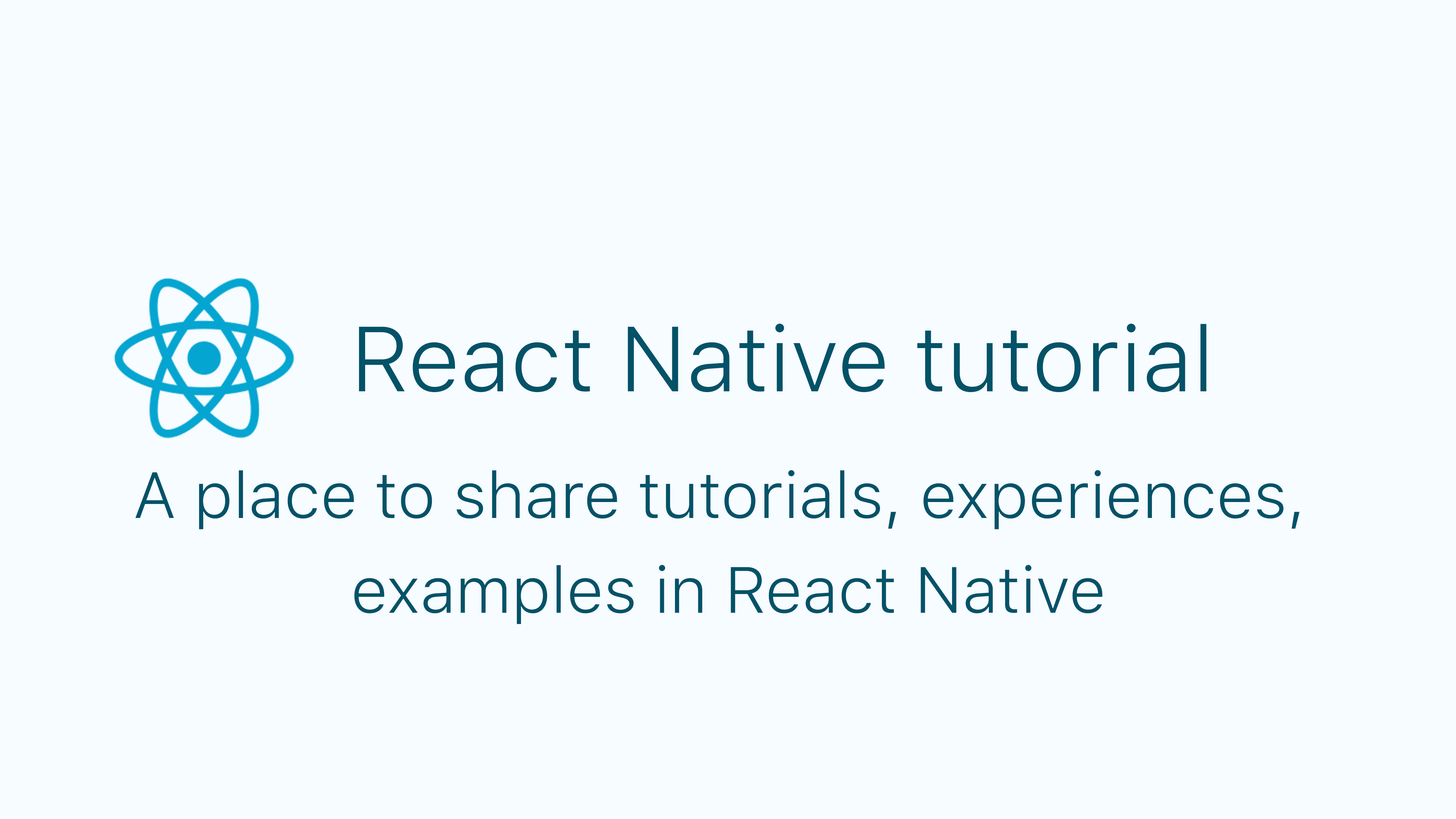
<style>
.page{position:relative;width:1456px;height:819px;background:#f6fcff}
.page>*{position:absolute;margin:0}
.t1{font:91.6px "SFUIText-Light";color:#025268}
.t2{font:64.8px/47.4px "SFUIText-Light";color:#025268}
</style>
<div class="page">
<p class="t1" style="left:359px;top:323px;width:847px;height:69px">React Native tutorial</p>
<p class="t2" style="left:135px;top:470px;width:1165px;height:154px;text-align:center">A place to share tutorials, experiences, <br><br>examples in React Native</p>
</div>
